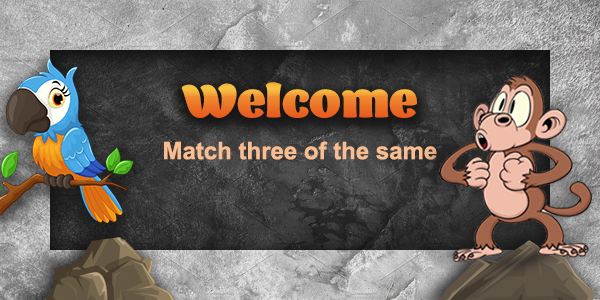
<style>
.page{position:relative;width:600px;height:300px}
.page>*{position:absolute;margin:0}
.t1{font:48px "BarricadaPro"}
.t2{font:24px "Arial-BoldMT";color:#f8bd91}
</style>
<div class="page">
<p class="t1" style="left:181px;top:82px;width:236px;height:36px">Welcome</p>
<p class="t2" style="left:164px;top:141px;width:273px;height:19px">Match three of the same</p>
</div>
